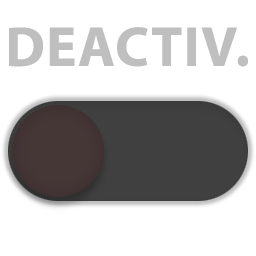
<style>
.page{position:relative;width:256px;height:256px;background:#ffffff}
.page>*{position:absolute;margin:0}
.t1{font:56.5px "MyriadPro-Bold";color:#bfbfbf;font-weight:bold}
</style>
<div class="page">
<p class="t1" style="left:9px;top:27px;width:239px;height:40px">DEACTIV.</p>
</div>
